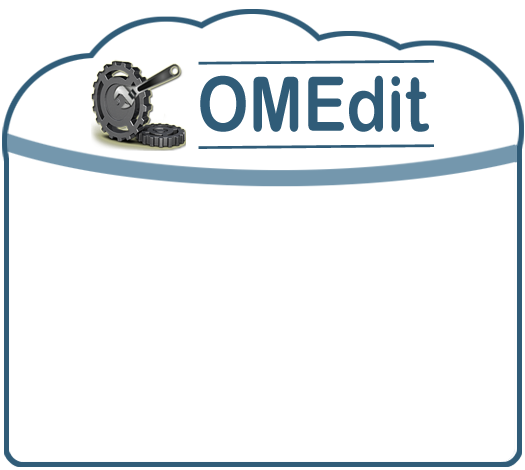
<style>
.page{position:relative;width:525px;height:470px;background:#ffffff}
.page>*{position:absolute;margin:0}
.t1{font:75.5px "ArialRoundedMTBold";color:#305c78;scale:0.86 1}
</style>
<div class="page">
<p class="t1" style="left:200px;top:75px;width:229px;height:57px">OMEdit</p>
</div>
